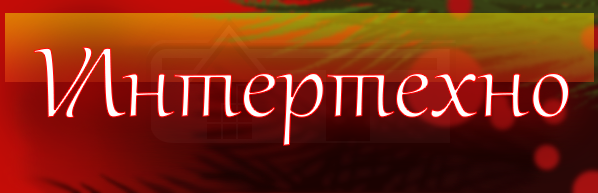
<style>
.page{position:relative;width:598px;height:193px}
.page>*{position:absolute;margin:0}
.t1{font:120.8px "Gabriola"}
.t2{font:120.8px "Gabriola";letter-spacing:-0.15em;font-style:italic}
.t3{font:120.8px "Gabriola";font-style:italic}
</style>
<div class="page">
<p class="t1" style="left:33px;top:46px;width:536px;height:100px"><span class="t2">V</span><span class="t3">Л</span>нтертехно</p>
</div>
